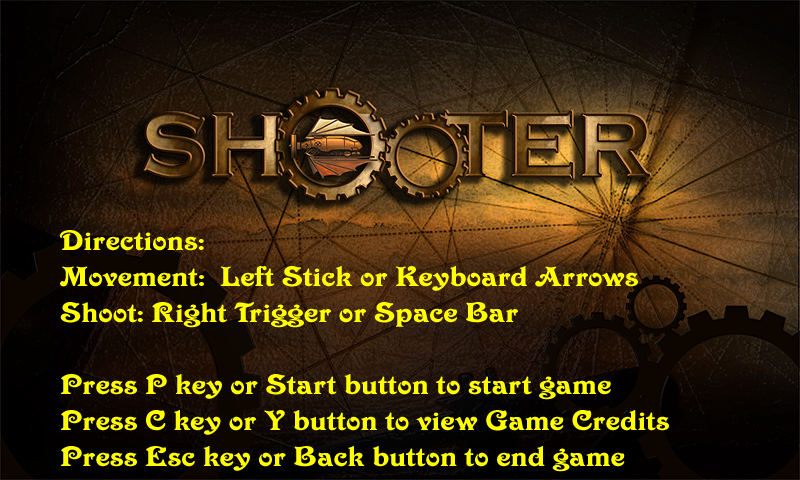
<style>
.page{position:relative;width:800px;height:480px}
.page>*{position:absolute;margin:0}
.t1{font:30px "VictorianStd";color:#ffff00;scale:1.25 1}
</style>
<div class="page">
<p class="t1" style="left:60px;top:230px;width:609px;height:242px">Directions:<br>Movement:  Left Stick or Keyboard Arrows<br>Shoot: Right Trigger or Space Bar<br><br>Press P key or Start button to start game<br>Press C key or Y button to view Game Credits<br>Press Esc key or Back button to end game</p>
</div>
